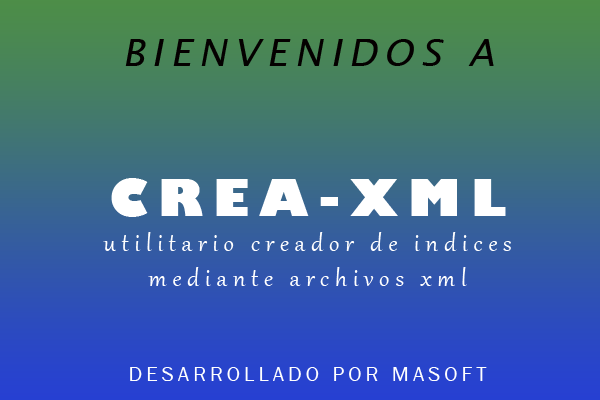
<style>
.page{position:relative;width:600px;height:400px}
.page>*{position:absolute;margin:0}
.t1{font:29.2px "Gabriola";letter-spacing:0.2em;color:#ffffff}
.t2{font:37.5px "LucidaSans-Italic";letter-spacing:0.2em;color:#040000}
.t3{font:50px "GillSans-UltraBold";letter-spacing:0.2em;color:#ffffff}
.t4{font:20.8px "FranklinGothic-Book";letter-spacing:0.2em;color:#ffffff}
</style>
<div class="page">
<p class="t1" style="left:103px;top:39px;width:408px;height:342px;text-align:center"><span class="t2">BIENVENIDOS A<br><br><br></span><span class="t3">CREA-XML <br></span>utilitario creador de indices mediante archivos xml<br><br><br><span class="t4">DESARROLLADO POR MASOFT</span></p>
</div>
